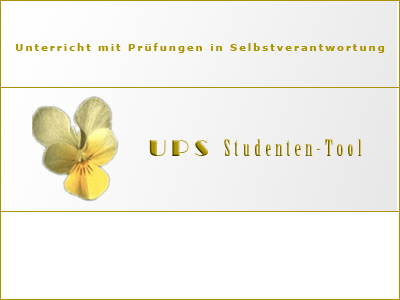
<style>
.page{position:relative;width:400px;height:300px;background:#ffffff}
.page>*{position:absolute;margin:0}
.t1{font:10px "Verdana-Bold";letter-spacing:0.2em;color:#ad9300}
.t2{font:22px "BirchStd";letter-spacing:0.2em}
.t3{font:24px "Broadway";letter-spacing:0.2em}
.t4{font:22px "BirchStd"}
</style>
<div class="page">
<p class="t1" style="left:16px;top:43px;width:369px;height:10px">Unterricht mit Prüfungen in Selbstverantwortung</p>
<p class="t2" style="left:149px;top:139px;width:213px;height:17px"><span class="t3">UPS </span>Studenten-Too<span class="t4">l</span></p>
</div>
